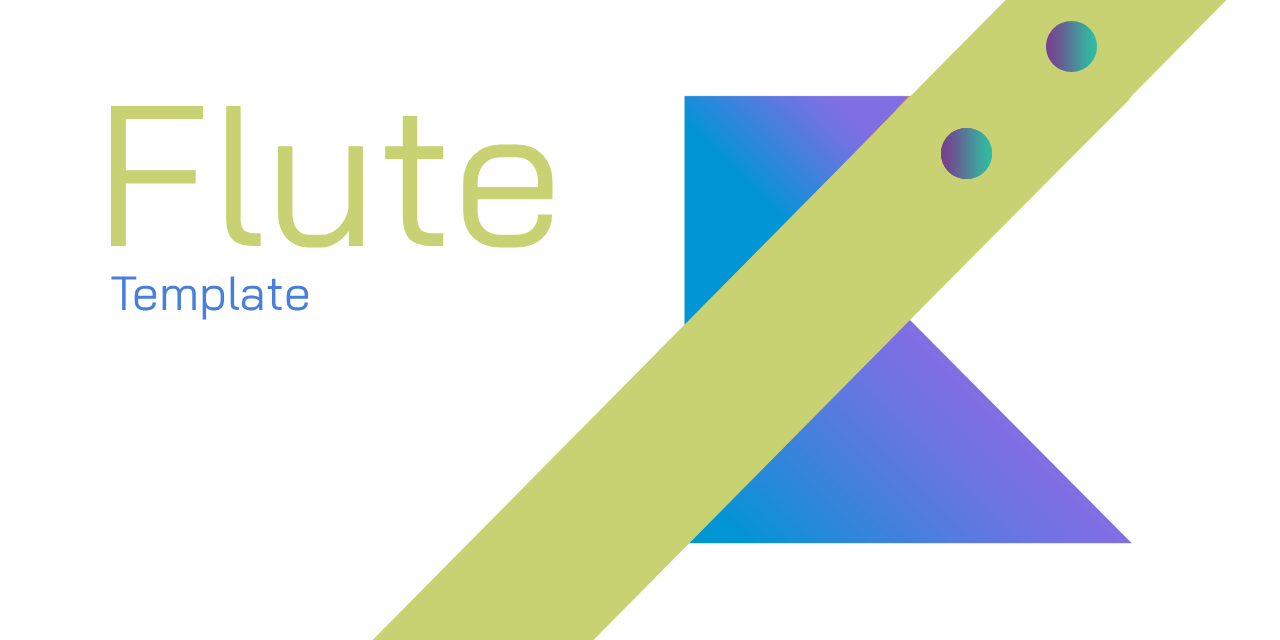
<style>
.page{position:relative;width:1280px;height:640px;background:#ffffff}
.page>*{position:absolute;margin:0}
.t1{font:200.1px "BaiJamjuree-Regular";color:#c8d272}
.t2{font:48px "BaiJamjuree-Regular";color:#487fdd}
</style>
<div class="page">
<p class="t1" style="left:111px;top:105px;width:442px;height:143px">Flute</p>
<p class="t2" style="left:111px;top:276px;width:198px;height:44px">Template</p>
</div>
